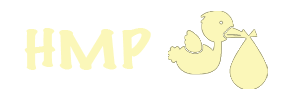
<style>
.page{position:relative;width:300px;height:100px;background:#ffffff}
.page>*{position:absolute;margin:0}
.t1{font:48px "MarkerFelt-Thin";color:#fbf7b9;scale:1.38 1}
</style>
<div class="page">
<p class="t1" style="left:24px;top:28px;width:127px;height:42px">HMP</p>
</div>
